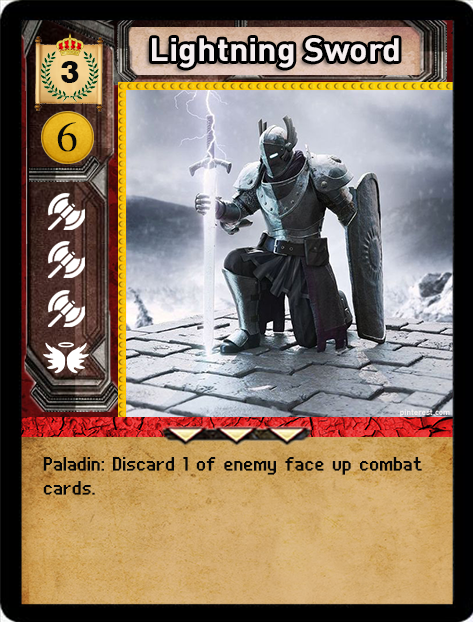
<style>
.page{position:relative;width:473px;height:622px}
.page>*{position:absolute;margin:0}
.t1{font:32px "DIN-Bold";color:#f6eff0;scale:1.06 1}
.t2{font:32px "Swiss721BT-Heavy";color:#090909}
.t3{font:40px "SimplifiedArabic";color:#090909;scale:1.05 1}
.t4{font:8px "DIN-Bold";color:#f6eff0}
.t5{font:24px "UNDA-BitmapFine";letter-spacing:0.01em;color:#060606;font-weight:bold}
</style>
<div class="page">
<p class="t1" style="left:152px;top:38px;width:247px;height:30px">Lightning Sword</p>
<p class="t2" style="left:61px;top:61px;width:18px;height:22px">3</p>
<p class="t3" style="left:57px;top:122px;width:20px;height:30px">6</p>
<p class="t4" style="left:400px;top:409px;width:50px;height:8px">pinterest.com</p>
<p class="t5" style="left:43px;top:457px;width:379px;height:38px">Paladin: Discard 1 of enemy face up combat cards.</p>
</div>
